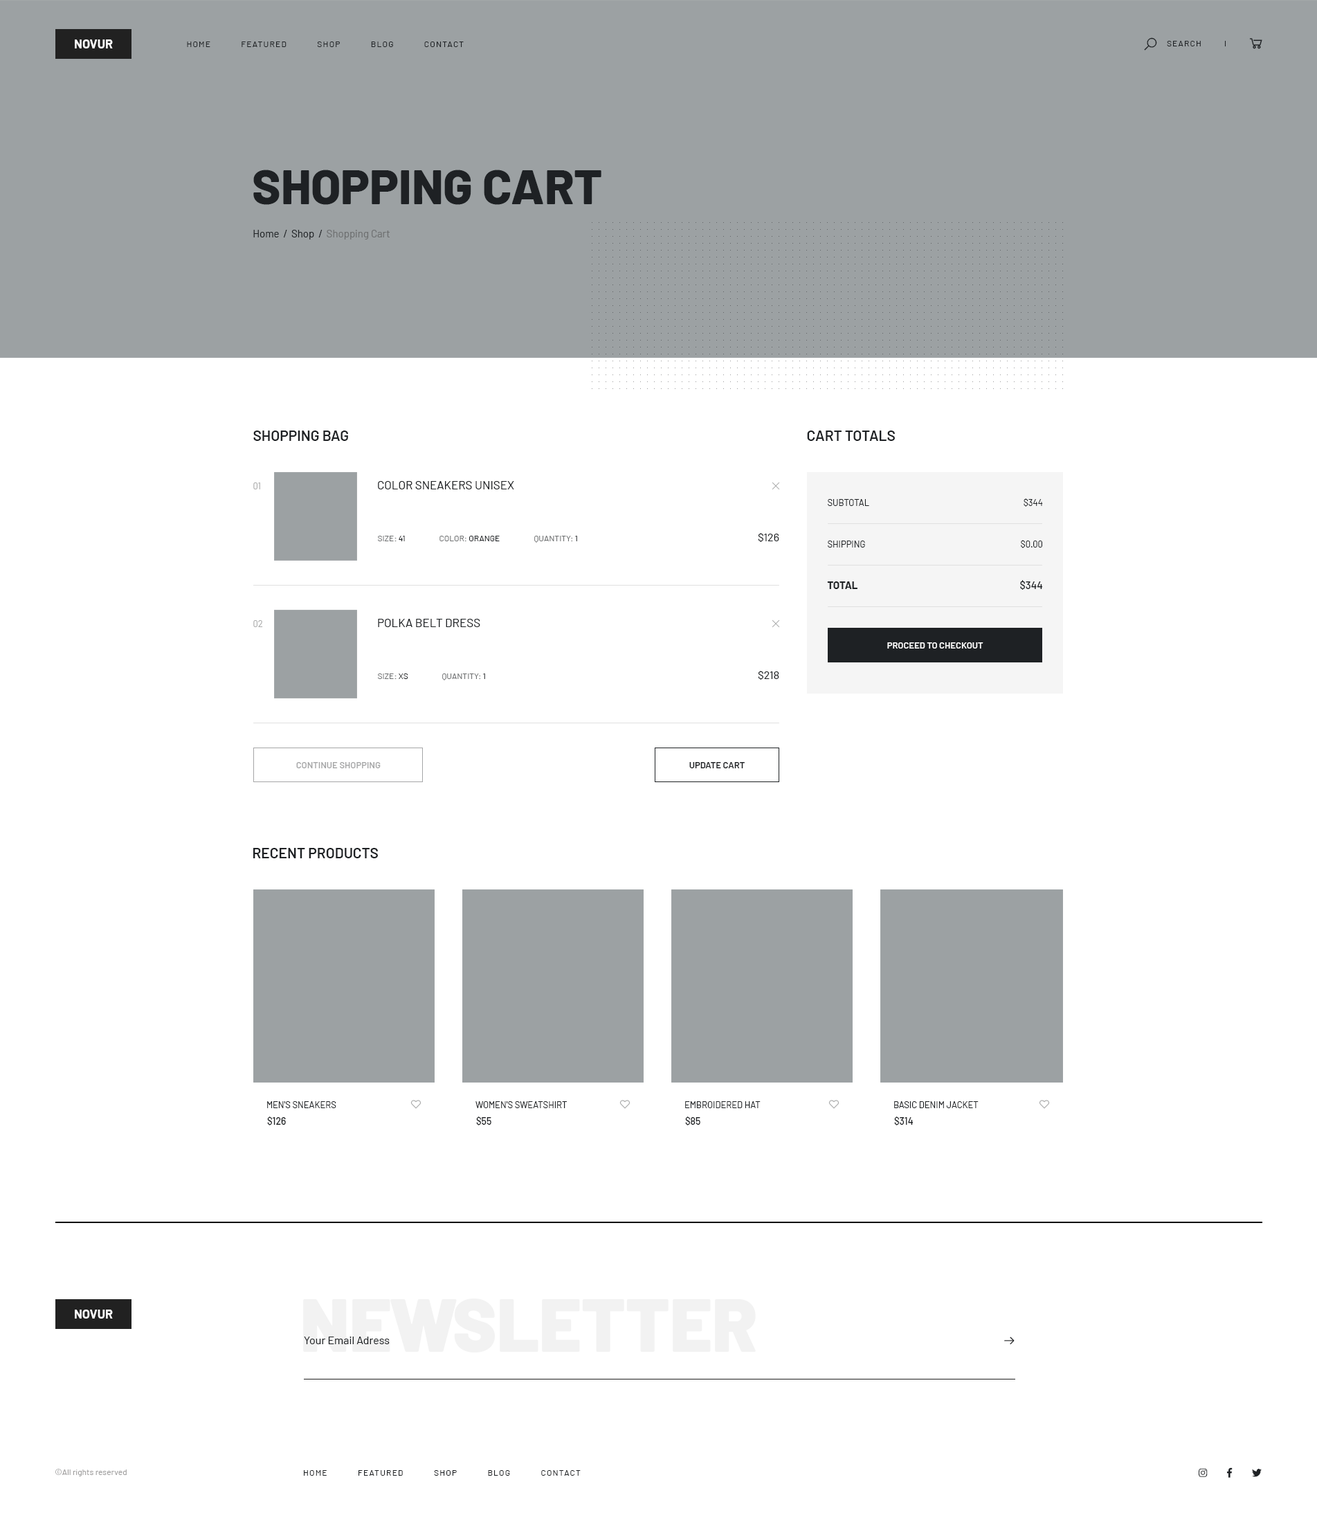
<style>
.page{position:relative;width:1317px;height:1520px;background:#ffffff}
.page>*{position:absolute;margin:0}
.t1{font:12.5px "Barlow-Bold";color:#fefefe;text-transform:uppercase}
.t2{font:8.3px "Barlow-Regular";letter-spacing:0.1em;color:#1e2124;text-transform:uppercase}
.t3{font:48.5px "Barlow-ExtraBold";color:#1e2124;text-transform:uppercase}
.t4{font:10.4px "Barlow-Regular";color:#1e2124}
.t5{font:10.4px "Barlow-Regular";color:#6e7071}
.t6{font:14.5px "Barlow-SemiBold";color:#1e2124;text-transform:uppercase}
.t7{font:9px "Barlow-Regular";color:#aaabab;text-transform:uppercase}
.t8{font:11.8px "Barlow-Regular";color:#1e2124;text-transform:uppercase}
.t9{font:9px "Barlow-Regular";color:#1e2124;text-transform:uppercase}
.t10{font:9px "Barlow-Regular";color:#1e2124}
.t11{font:11.1px "Barlow-Regular";color:#1e2124}
.t12{font:8.3px "Barlow-Regular";color:#6e7071;text-transform:uppercase}
.t13{font:8.3px "Barlow-Regular";color:#1e2124;text-transform:uppercase}
.t14{font:8.3px "Barlow-Regular";color:#1e2124}
.t15{font:10.4px "Barlow-Bold";color:#1e2124;text-transform:uppercase}
.t16{font:10.4px "Barlow-Medium";color:#1e2124}
.t17{font:9px "Barlow-SemiBold";color:#ffffff;text-transform:uppercase}
.t18{font:9px "Barlow-SemiBold";color:#a5a6a7;text-transform:uppercase}
.t19{font:9px "Barlow-SemiBold";color:#1e2124;text-transform:uppercase}
.t20{font:9.7px "Barlow-Medium";color:#1e2124}
.t21{font:74.1px "Barlow-Black";color:#f2f2f2}
.t22{font:8.3px "Barlow-Regular";color:#9e9d9d}
</style>
<div class="page">
<p class="t1" style="left:75px;top:39px;width:38px;height:9px">novur</p>
<p class="t2" style="left:187px;top:42px;width:277px;height:5px">Home            Featured            Shop            Blog            Contact</p>
<p class="t2" style="left:1167px;top:41px;width:34px;height:5px">Search</p>
<p class="t3" style="left:253px;top:170px;width:349px;height:35px">Shopping Cart</p>
<p class="t4" style="left:253px;top:230px;width:137px;height:10px">Home  /  Shop  /<span class="t5">  Shopping Cart</span></p>
<p class="t6" style="left:253px;top:431px;width:95px;height:10px">Shopping Bag</p>
<p class="t6" style="left:807px;top:431px;width:88px;height:10px">Cart totals</p>
<p class="t7" style="left:253px;top:483px;width:7px;height:6px">01</p>
<p class="t8" style="left:378px;top:481px;width:136px;height:8px">Color Sneakers Unisex</p>
<p class="t9" style="left:828px;top:499px;width:42px;height:7px">Subtotal</p>
<p class="t10" style="left:1024px;top:498px;width:19px;height:9px">$344</p>
<p class="t11" style="left:758px;top:533px;width:22px;height:9px">$126</p>
<p class="t12" style="left:378px;top:536px;width:27px;height:5px">Size:<span class="t13"> 41</span></p>
<p class="t12" style="left:440px;top:536px;width:60px;height:5px">Color:<span class="t13"> Orange</span></p>
<p class="t12" style="left:534px;top:536px;width:43px;height:7px">Quantity: <span class="t14">1</span></p>
<p class="t9" style="left:828px;top:541px;width:37px;height:7px">Shipping</p>
<p class="t10" style="left:1021px;top:540px;width:22px;height:8px">$0.00</p>
<p class="t15" style="left:827px;top:582px;width:31px;height:7px">Total</p>
<p class="t16" style="left:1020px;top:580px;width:23px;height:10px">$344</p>
<p class="t7" style="left:253px;top:620px;width:10px;height:7px">02</p>
<p class="t8" style="left:378px;top:619px;width:102px;height:8px">Polka Belt Dress</p>
<p class="t17" style="left:888px;top:642px;width:96px;height:7px">Proceed to Checkout</p>
<p class="t12" style="left:378px;top:674px;width:30px;height:5px">Size:<span class="t13"> XS</span></p>
<p class="t12" style="left:442px;top:674px;width:43px;height:7px">Quantity: <span class="t14">1</span></p>
<p class="t11" style="left:758px;top:671px;width:22px;height:9px">$218</p>
<p class="t18" style="left:296px;top:762px;width:85px;height:6px">Continue shopping</p>
<p class="t19" style="left:690px;top:762px;width:55px;height:6px">Update cart</p>
<p class="t6" style="left:253px;top:848px;width:125px;height:10px">Recent Products</p>
<p class="t9" style="left:267px;top:1101px;width:69px;height:7px">Men's Sneakers</p>
<p class="t9" style="left:476px;top:1101px;width:91px;height:7px">Women's Sweatshirt</p>
<p class="t9" style="left:685px;top:1101px;width:76px;height:7px">Embroidered Hat</p>
<p class="t9" style="left:894px;top:1101px;width:85px;height:7px">Basic Denim Jacket</p>
<p class="t20" style="left:267px;top:1117px;width:19px;height:9px">$126</p>
<p class="t20" style="left:476px;top:1117px;width:16px;height:9px">$55</p>
<p class="t20" style="left:685px;top:1117px;width:16px;height:9px">$85</p>
<p class="t20" style="left:894px;top:1117px;width:20px;height:9px">$314</p>
<p class="t21" style="left:303px;top:1299px;width:453px;height:54px">NEWSLETTER</p>
<p class="t1" style="left:75px;top:1310px;width:38px;height:9px">Novur</p>
<p class="t11" style="left:304px;top:1337px;width:86px;height:7px">Your Email Adress</p>
<p class="t22" style="left:55px;top:1469px;width:72px;height:8px">©All rights reserved</p>
<p class="t2" style="left:304px;top:1470px;width:277px;height:6px">Home            Featured            Shop            Blog            Contact</p>
</div>
